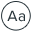
<style>
.page{position:relative;width:32px;height:32px;background:#ffffff}
.page>*{position:absolute;margin:0}
.t1{font:15.6px "ProximaNova-Regular";letter-spacing:0.025em;color:#263238}
</style>
<div class="page">
<p class="t1" style="left:7px;top:10px;width:18px;height:12px">Aa</p>
</div>
